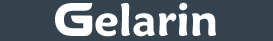
<style>
.page{position:relative;width:273px;height:41px;background:#35434e}
.page>*{position:absolute;margin:0}
.t1{font:58px "GroundControl-Regular";color:#ffffff}
.t2{font:45px "MaiandraGD-DemiBold";color:#ffffff}
</style>
<div class="page">
<p class="t1" style="left:55px;top:3px;width:38px;height:33px">G</p>
<p class="t2" style="left:95px;top:2px;width:122px;height:35px">elarin</p>
</div>
